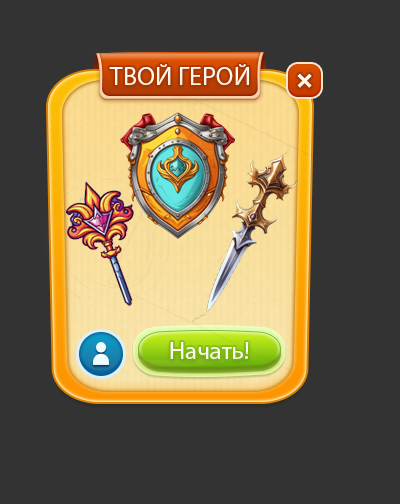
<style>
.page{position:relative;width:400px;height:504px;background:#333333}
.page>*{position:absolute;margin:0}
.t1{font:26px "MyriadPro-Regular";color:#ffffff}
.t2{font:25px "MyriadPro-Regular";color:#fdf6e8}
</style>
<div class="page">
<p class="t1" style="left:109px;top:64px;width:140px;height:21px">ТВОЙ ГЕРОЙ</p>
<p class="t2" style="left:170px;top:342px;width:79px;height:17px">Начать!</p>
</div>
